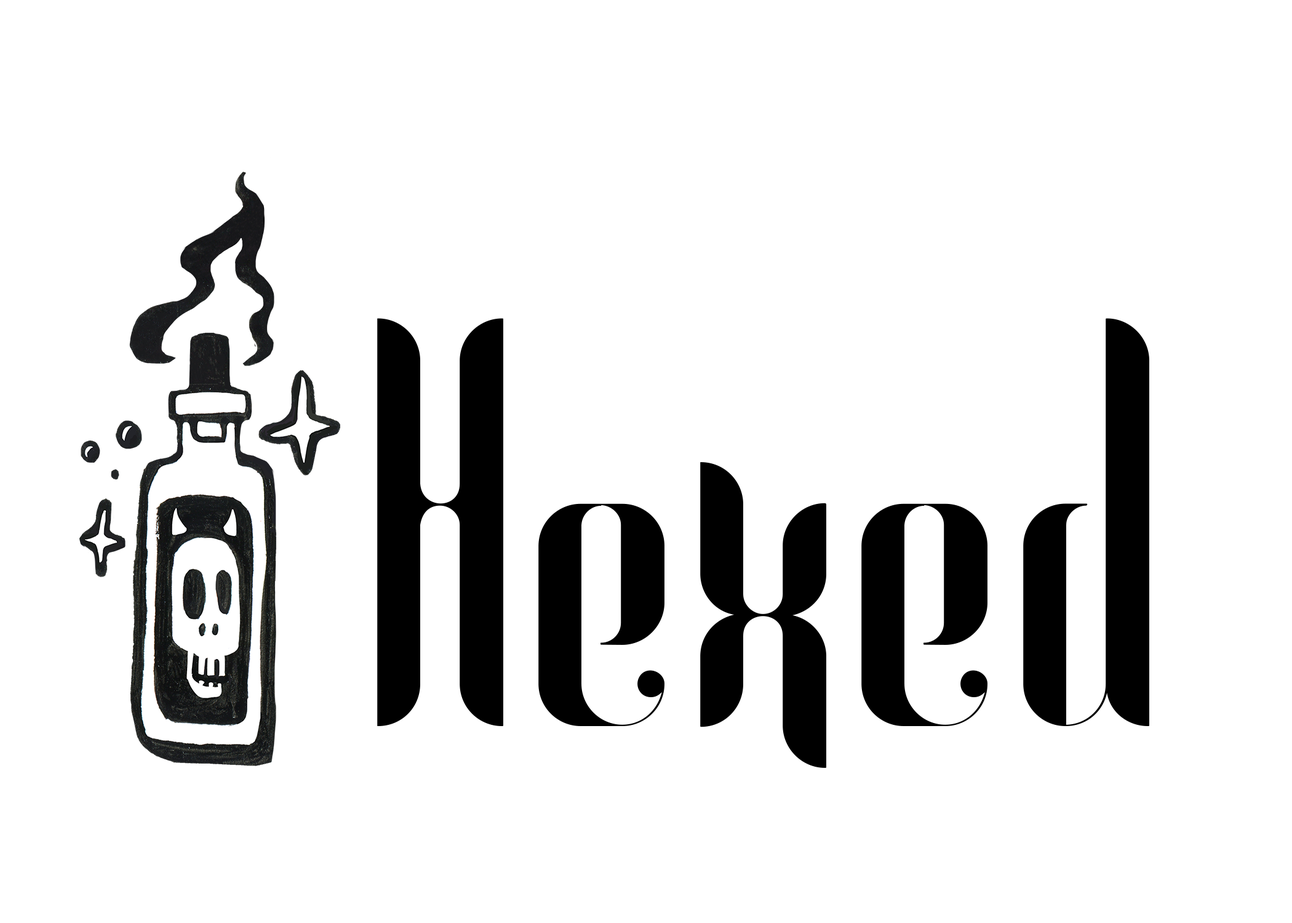
<style>
.page{position:relative;width:1292px;height:923px;background:#ffffff}
.page>*{position:absolute;margin:0}
.t1{font:640.9px "Alexandria-Regular";color:#000000}
</style>
<div class="page">
<p class="t1" style="left:377px;top:318px;width:772px;height:450px">Hexed</p>
</div>
